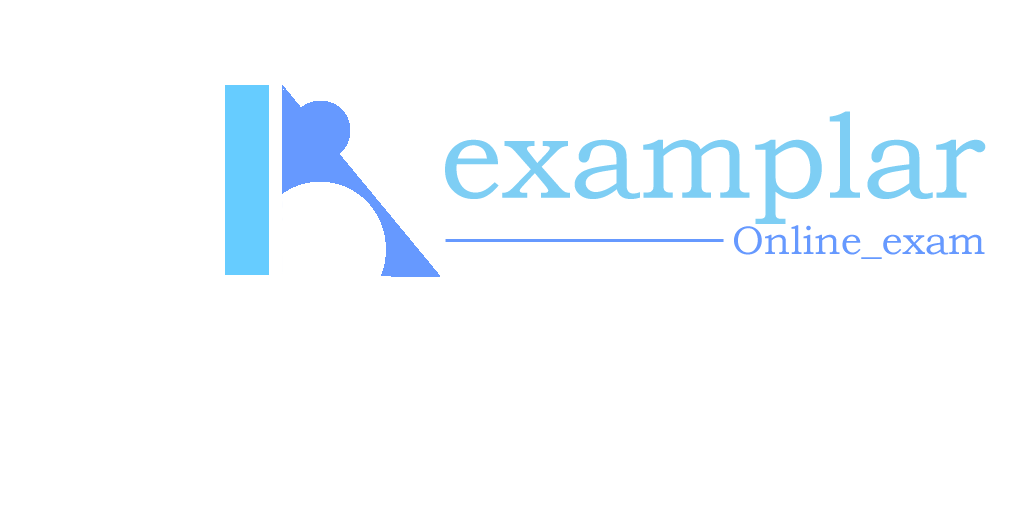
<style>
.page{position:relative;width:1024px;height:512px;background:#ffffff}
.page>*{position:absolute;margin:0}
.t1{font:120px "BookmanOldStyle";color:#7ecef4}
.t2{font:40px "BookmanOldStyle";color:#6699ff}
</style>
<div class="page">
<p class="t1" style="left:445px;top:111px;width:541px;height:113px">examplar</p>
<p class="t2" style="left:734px;top:225px;width:251px;height:34px">Online_exam</p>
</div>
